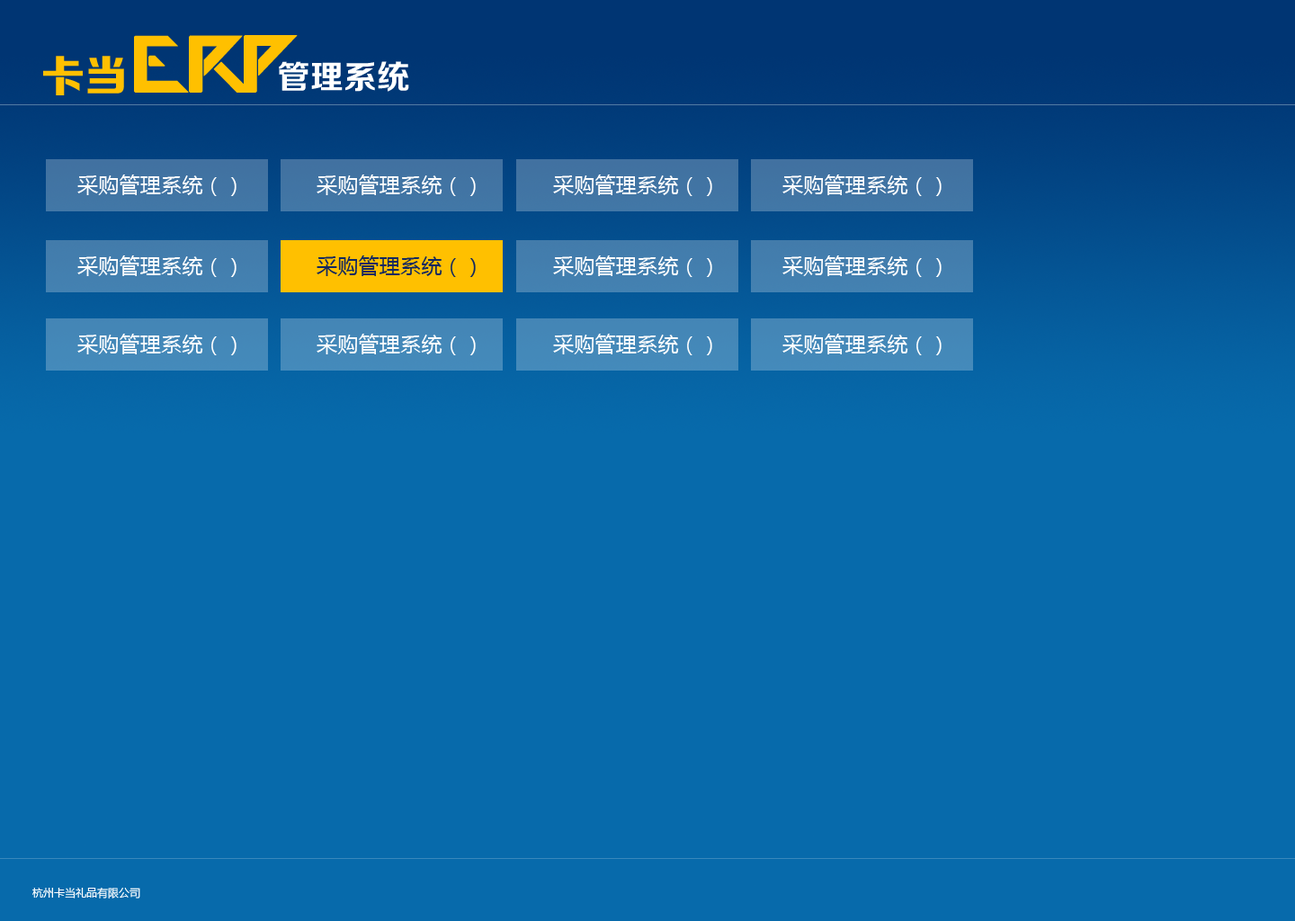
<style>
.page{position:relative;width:1295px;height:921px;background:#076aab}
.page>*{position:absolute;margin:0}
.t1{font:65.2px "Amputa-Bangiz";color:#ffc000}
.t2{font:43.2px "FZZDHJW--GB1-0";color:#ffc000}
.t3{font:33.1px "FZZCHJW--GB1-0";color:#ffffff}
.t4{font:20.9px "MicrosoftYaHei";color:#ffffff}
.t5{font:20.9px "MicrosoftYaHei";color:#132860}
.t6{font:10.8px "MicrosoftYaHei";color:#ffffff}
</style>
<div class="page">
<p class="t1" style="left:134px;top:35px;width:164px;height:58px">ERP</p>
<p class="t2" style="left:43px;top:56px;width:81px;height:39px">卡当</p>
<p class="t3" style="left:279px;top:61px;width:130px;height:31px">管理系统</p>
<p class="t4" style="left:77px;top:174px;width:160px;height:22px">采购管理系统（）</p>
<p class="t4" style="left:317px;top:174px;width:159px;height:22px">采购管理系统（）</p>
<p class="t4" style="left:553px;top:174px;width:159px;height:22px">采购管理系统（）</p>
<p class="t4" style="left:782px;top:174px;width:160px;height:22px">采购管理系统（）</p>
<p class="t4" style="left:77px;top:255px;width:160px;height:22px">采购管理系统（）</p>
<p class="t5" style="left:317px;top:255px;width:159px;height:22px">采购管理系统（）</p>
<p class="t4" style="left:553px;top:255px;width:159px;height:22px">采购管理系统（）</p>
<p class="t4" style="left:782px;top:255px;width:160px;height:22px">采购管理系统（）</p>
<p class="t4" style="left:77px;top:334px;width:160px;height:21px">采购管理系统（）</p>
<p class="t4" style="left:317px;top:334px;width:159px;height:21px">采购管理系统（）</p>
<p class="t4" style="left:553px;top:334px;width:159px;height:21px">采购管理系统（）</p>
<p class="t4" style="left:782px;top:334px;width:160px;height:21px">采购管理系统（）</p>
<p class="t6" style="left:32px;top:887px;width:108px;height:11px">杭州卡当礼品有限公司</p>
</div>
